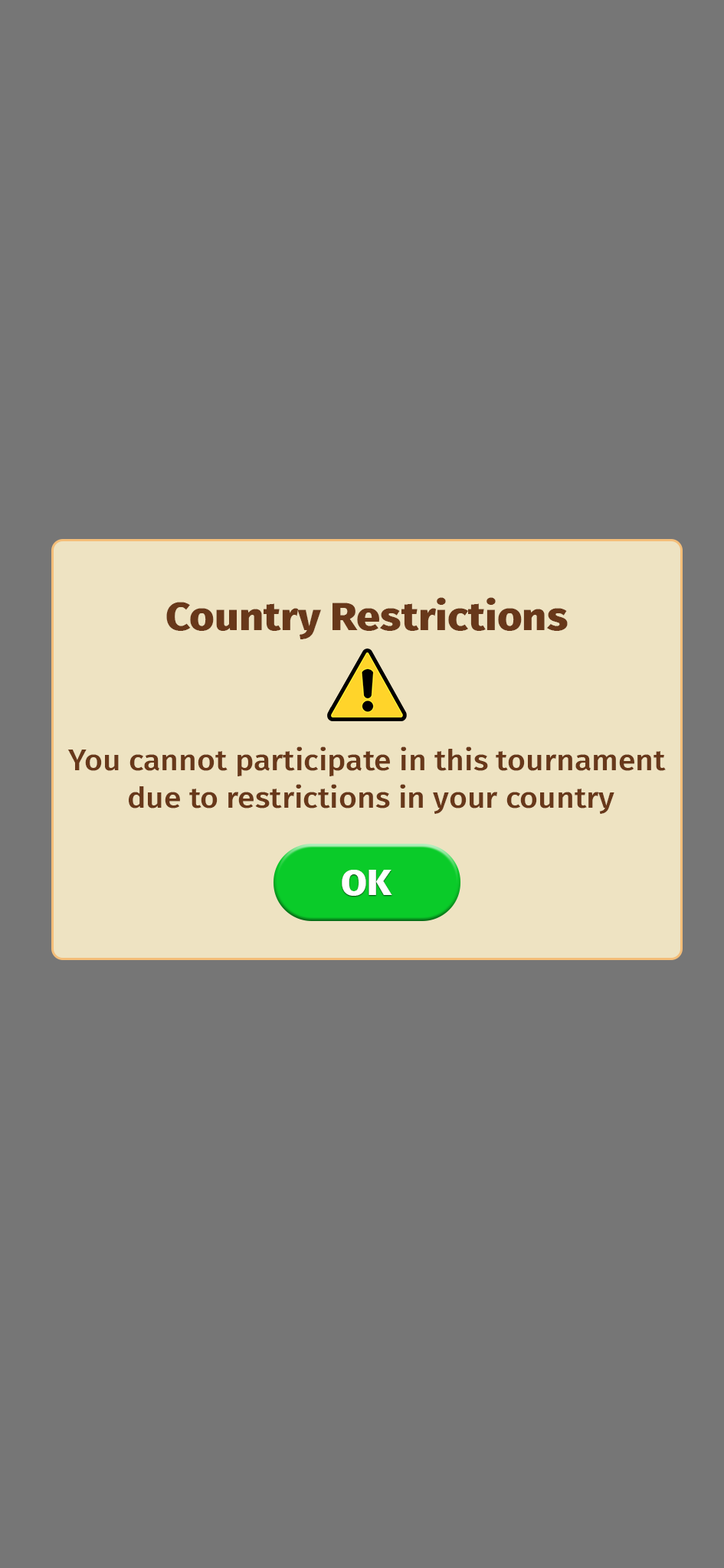
<style>
.page{position:relative;width:724px;height:1568px;background:#767676}
.page>*{position:absolute;margin:0}
.t1{font:40.7px "FiraSans-ExtraBold";color:#68381a;scale:1.05 1}
.t2{font:29.8px "FiraSans-Medium";color:#68381a;scale:1.05 1}
.t3{font:35.6px "FiraSans-ExtraBold";color:#ffffff;scale:1.05 1}
</style>
<div class="page">
<p class="t1" style="left:166px;top:597px;width:401px;height:42px">Country Restrictions</p>
<p class="t2" style="left:67px;top:746px;width:598px;height:68px;text-align:center">You cannot participate in this tournament <br>due to restrictions in your country</p>
<p class="t3" style="left:341px;top:870px;width:51px;height:26px">OK</p>
</div>
